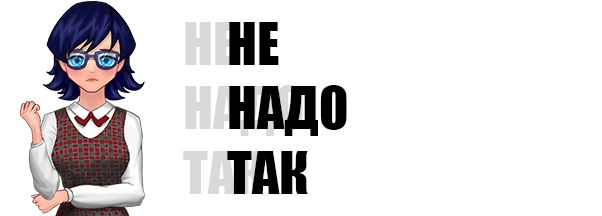
<style>
.page{position:relative;width:602px;height:216px;background:#ffffff}
.page>*{position:absolute;margin:0}
.t1{font:53.8px "Impact";color:#000000}
</style>
<div class="page">
<p class="t1" style="left:227px;top:22px;width:120px;height:172px">НЕ<br>НАДО<br>ТАК</p>
</div>
